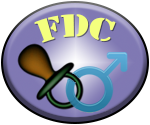
<style>
.page{position:relative;width:150px;height:125px;background:#ffffff}
.page>*{position:absolute;margin:0}
.t1{font:33.3px "Stencil";color:#f4ff7e}
</style>
<div class="page">
<p class="t1" style="left:34px;top:14px;width:82px;height:29px">FDC</p>
</div>
